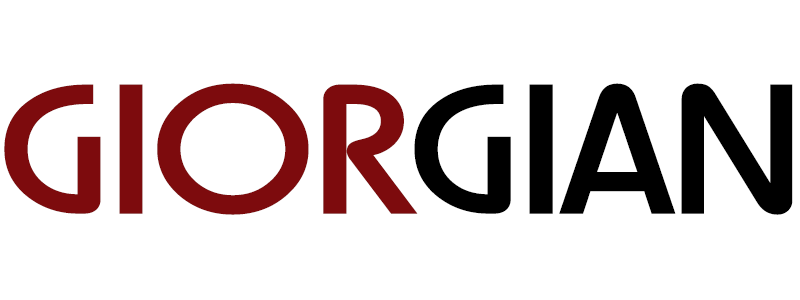
<style>
.page{position:relative;width:800px;height:300px;background:#ffffff}
.page>*{position:absolute;margin:0}
.t1{font:192.3px "Harry-Heavy";letter-spacing:0.005em;color:#7d0b0d;font-variant:small-caps;scale:1.16 1}
.t2{font:192.3px "Harry-Heavy";letter-spacing:0.005em;color:#000000;font-variant:small-caps;scale:1.16 1}
</style>
<div class="page">
<p class="t1" style="left:4px;top:83px;width:789px;height:132px">GIOR<span class="t2">GIAN</span></p>
</div>
